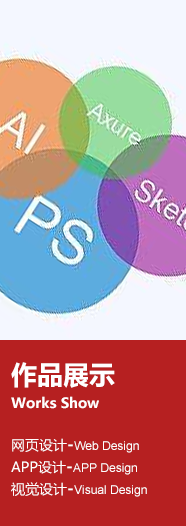
<style>
.page{position:relative;width:186px;height:526px;background:#b62021}
.page>*{position:absolute;margin:0}
.t1{font:14px/24px "MicrosoftYaHei-Bold";color:#ffffff}
.t2{font:26px/24px "MicrosoftYaHei-Bold";color:#ffffff}
.t3{font:12px/22px "ArialMT";color:#ffffff}
.t4{font:14px/22px "MicrosoftYaHei";color:#ffffff}
.t5{font:16px/22px "MicrosoftYaHei-Bold";color:#ffffff}
</style>
<div class="page">
<p class="t1" style="left:11px;top:362px;width:104px;height:47px"><span class="t2">作品展示<br></span>Works Show</p>
<p class="t3" style="left:11px;top:438px;width:136px;height:59px"><span class="t4">网页设计</span><span class="t5">-</span>Web Design<br><span class="t4">APP设计</span><span class="t5">-</span>APP Design<br><span class="t4">视觉设计</span><span class="t5">-</span>Visual Design</p>
</div>
